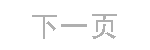
<style>
.page{position:relative;width:150px;height:50px;background:#ffffff}
.page>*{position:absolute;margin:0}
.t1{font:30px "AdobeHeitiStd-Regular";color:#afafaf}
</style>
<div class="page">
<p class="t1" style="left:32px;top:14px;width:85px;height:25px">下一页</p>
</div>
